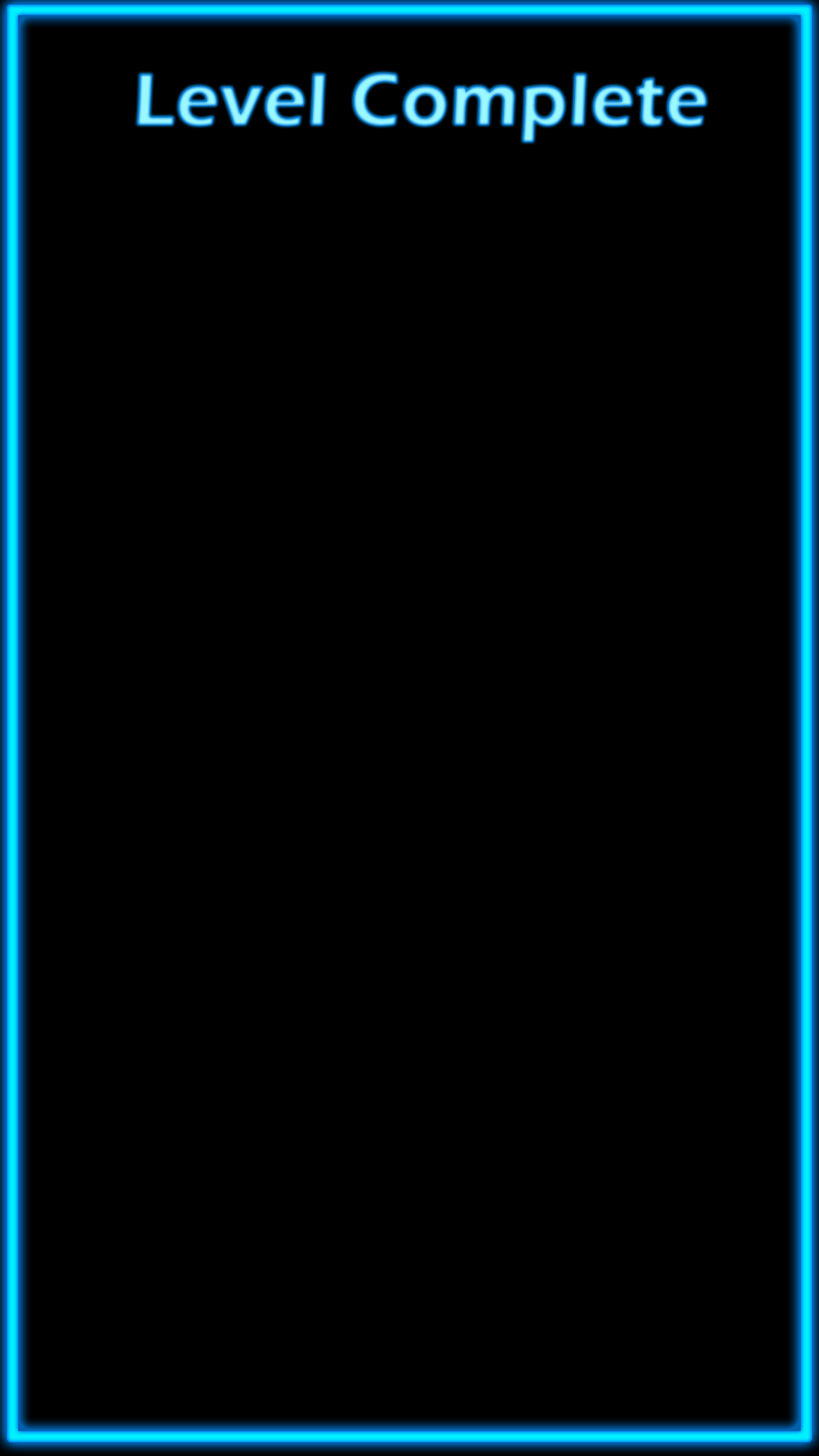
<style>
.page{position:relative;width:819px;height:1456px;background:#000000}
.page>*{position:absolute;margin:0}
.t1{font:75.8px "ErasITC-Demi";letter-spacing:0.025em}
</style>
<div class="page">
<p class="t1" style="left:137px;top:73px;width:570px;height:70px">Level Complete</p>
</div>
